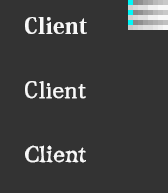
<style>
.page{position:relative;width:168px;height:193px;background:#333333}
.page>*{position:absolute;margin:0}
.t1{font:22px/64px "KozMinPro-Heavy";letter-spacing:0.022em;color:#f8f8f8}
.t2{font:22px/64px "AdobeFangsongStd-Regular";letter-spacing:0.028em;color:#f8f8f8;font-weight:bold}
.t3{font:22px/64px "ComicMysteryStd-DB";letter-spacing:-0.006em;color:#f8f8f8}
</style>
<div class="page">
<p class="t1" style="left:25px;top:17px;width:62px;height:146px">Client<br><span class="t2">Client<br></span><span class="t3">Client</span></p>
</div>
